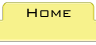
<style>
.page{position:relative;width:96px;height:45px;background:#f7f28c}
.page>*{position:absolute;margin:0}
.t1{font:16.2px "BankGothicBT-Light";color:#000000}
</style>
<div class="page">
<p class="t1" style="left:27px;top:8px;width:44px;height:9px">Home</p>
</div>
